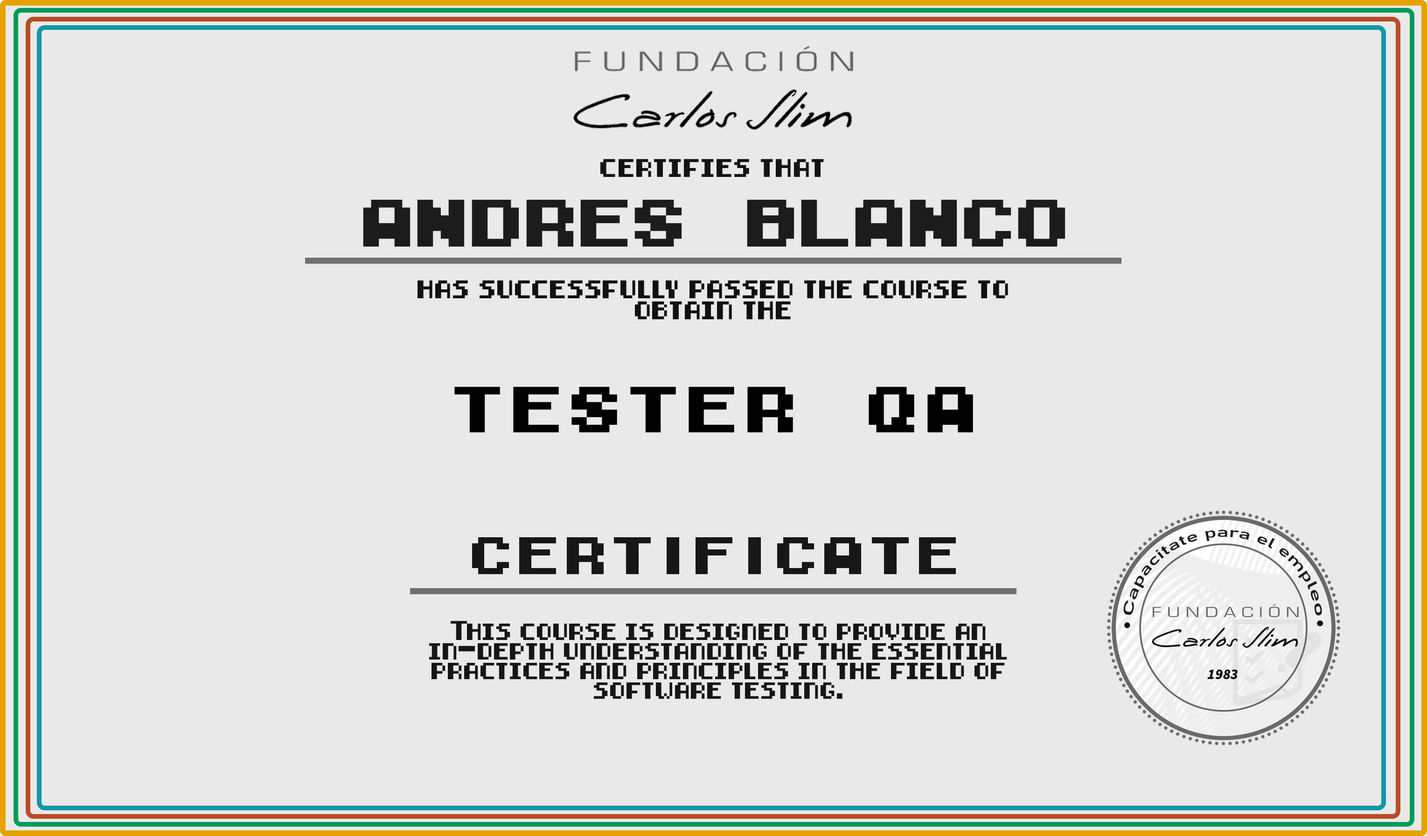
<style>
.page{position:relative;width:1427px;height:836px;background:#e9e9e9}
.page>*{position:absolute;margin:0}
.t1{font:17.8px "8-bit-pusab";color:#141414}
.t2{font:62.4px "M04_FATAL-FURY-BLACK";letter-spacing:-0.1em;color:#1c1c1c}
.t3{font:17.8px "8-bit-pusab";color:#111111}
.t4{font:60.6px "M04_FATAL-FURY-BLACK";color:#000000}
.t5{font:49.1px "M04_FATAL-FURY-BLACK";color:#171717}
.t6{font:16.3px "8-bit-pusab";color:#161616}
</style>
<div class="page">
<p class="t1" style="left:600px;top:159px;width:224px;height:18px">certifies that</p>
<p class="t2" style="left:363px;top:199px;width:703px;height:48px">Andres Blanco</p>
<p class="t3" style="left:418px;top:280px;width:590px;height:39px;text-align:center">has successfully passed the course to  obtain the</p>
<p class="t4" style="left:454px;top:386px;width:519px;height:46px">tESTER QA</p>
<p class="t5" style="left:472px;top:537px;width:484px;height:37px">Certificate</p>
<p class="t6" style="left:429px;top:620px;width:578px;height:78px;text-align:center">This course is designed to provide an in-depth understanding of the essential practices and principles in the field of software testing.</p>
</div>
